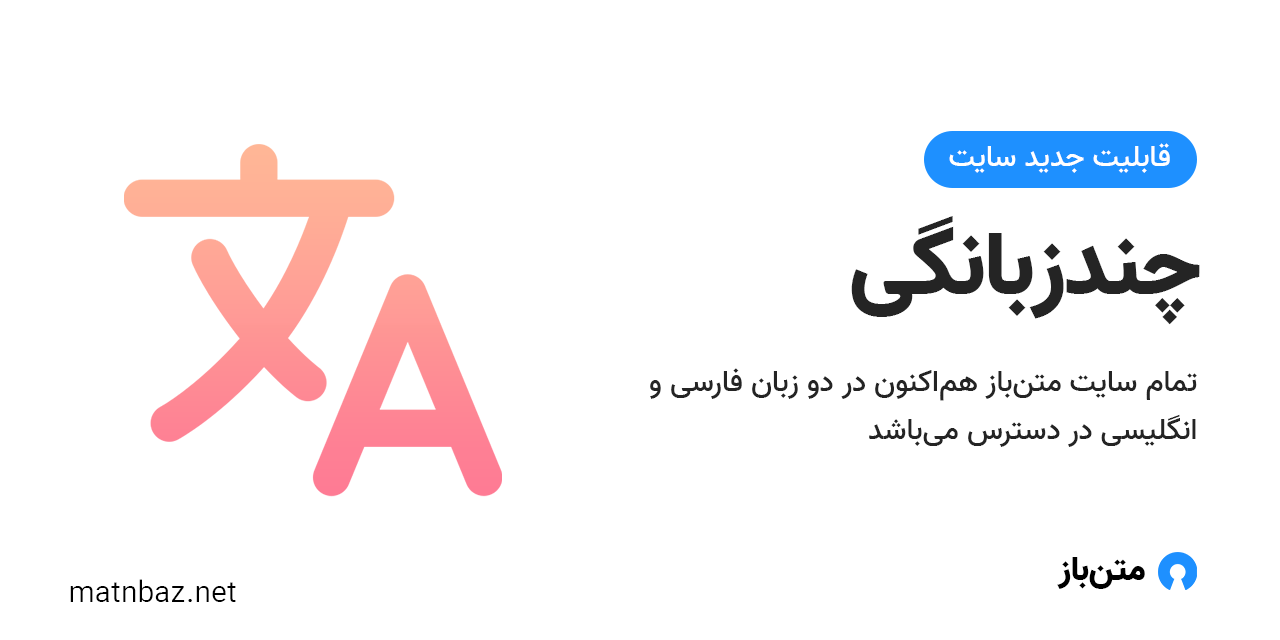
<style>
.page{position:relative;width:1280px;height:640px;background:#ffffff}
.page>*{position:absolute;margin:0}
.t1{font:30px "Vazir-Medium";color:#ffffff}
.t2{font:90px "Vazir-Black";color:#242424}
.t3{font:30px/48px "Vazir-Medium";color:#242424}
.t4{font:34.2px "Vazir-Black";color:#000000}
.t5{font:30px "Vazir-Light";color:#000000}
</style>
<div class="page">
<p class="t1" style="left:949px;top:143px;width:221px;height:30px">قابلیت جدید سایت</p>
<p class="t2" style="left:851px;top:216px;width:349px;height:109px">چند‌زبانگی</p>
<p class="t3" style="left:650px;top:368px;width:547px;height:79px;text-align:right">تمام سایت متن‌باز هم‌اکنون در دو زبان فارسی و انگلیسی در دسترس می‌باشد</p>
<p class="t4" style="left:1057px;top:557px;width:88px;height:32px">متن‌باز</p>
<p class="t5" style="left:70px;top:579px;width:166px;height:23px">matnbaz.net</p>
</div>
